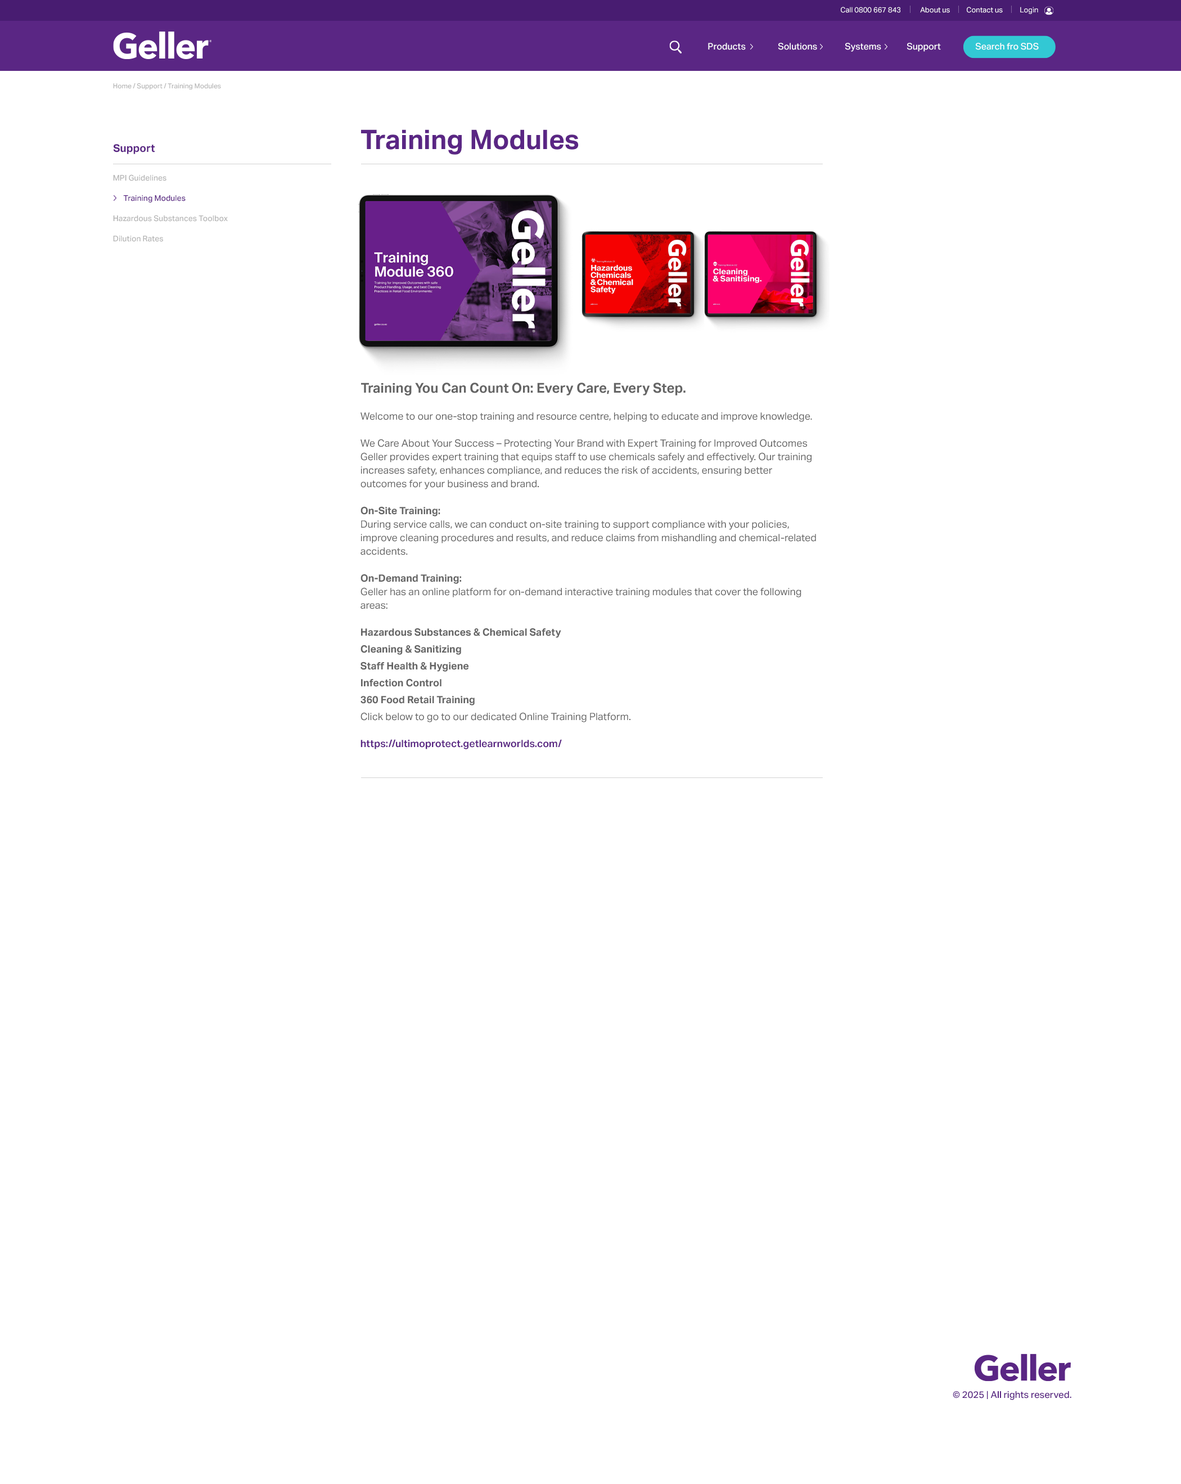
<style>
.page{position:relative;width:1181px;height:1484px;background:#ffffff}
.page>*{position:absolute;margin:0}
.t1{font:7.3px "AktivGrotesk-Regular";color:#fefefe}
.t2{font:9px "AktivGrotesk-Medium";color:#fefefe}
.t3{font:6.8px "AktivGrotesk-Medium";color:#b4b4b4}
.t4{font:27px "AktivGrotesk-Bold";color:#5a2684}
.t5{font:10.7px "AktivGrotesk-Bold";color:#5a2684}
.t6{font:7.9px/20.2px "AktivGrotesk-Medium";color:#b4b4b4}
.t7{font:7.9px/20.2px "AktivGrotesk-Medium";color:#5a2684}
.t8{font:13.5px "AktivGrotesk-Bold";color:#646464}
.t9{font:10.1px/13.5px "AktivGrotesk-Regular";color:#646464}
.t10{font:10.1px/13.5px "AktivGrotesk-Bold";color:#646464}
.t11{font:10.1px/13.5px "AktivGrotesk-SemiBold";color:#5a2684}
.t12{font:9.4px "AktivGrotesk-Medium";color:#5a2684}
</style>
<div class="page">
<p class="t1" style="left:841px;top:7px;width:60px;height:6px">Call 0800 667 843</p>
<p class="t1" style="left:920px;top:7px;width:30px;height:6px">About us</p>
<p class="t1" style="left:967px;top:7px;width:36px;height:6px">Contact us</p>
<p class="t1" style="left:1020px;top:7px;width:18px;height:7px">Login</p>
<p class="t2" style="left:708px;top:43px;width:38px;height:7px">Products</p>
<p class="t2" style="left:778px;top:43px;width:39px;height:7px">Solutions</p>
<p class="t2" style="left:845px;top:43px;width:36px;height:9px">Systems</p>
<p class="t2" style="left:907px;top:43px;width:34px;height:9px">Support</p>
<p class="t2" style="left:975px;top:43px;width:64px;height:7px">Search fro SDS</p>
<p class="t3" style="left:113px;top:83px;width:108px;height:7px">Home / Support / Training Modules</p>
<p class="t4" style="left:361px;top:129px;width:218px;height:26px">Training Modules</p>
<p class="t5" style="left:113px;top:144px;width:42px;height:10px">Support</p>
<p class="t6" style="left:113px;top:174px;width:115px;height:68px">MPI Guidelines<br><span class="t7">      Training Modules<br></span>Hazardous Substances Toolbox<br>Dilution Rates</p>
<p class="t8" style="left:361px;top:382px;width:325px;height:13px">Training You Can Count On: Every Care, Every Step.</p>
<p class="t9" style="left:361px;top:412px;width:455px;height:337px">Welcome to our one-stop training and resource centre, helping to educate and improve knowledge.<br><br>We Care About Your Success – Protecting Your Brand with Expert Training for Improved Outcomes<br>Geller provides expert training that equips staff to use chemicals safely and effectively. Our training increases safety, enhances compliance, and reduces the risk of accidents, ensuring better outcomes for your business and brand.<br><br><span class="t10">On-Site Training:<br></span>During service calls, we can conduct on-site training to support compliance with your policies, improve cleaning procedures and results, and reduce claims from mishandling and chemical-related accidents.<br><br><span class="t10">On-Demand Training:<br></span>Geller has an online platform for on-demand interactive training modules that cover the following areas:<br><br><span class="t10">Hazardous Substances &amp; Chemical Safety<br>Cleaning &amp; Sanitizing<br>Staff Health &amp; Hygiene<br>Infection Control<br>360 Food Retail Training<br></span>Click below to go to our dedicated Online Training Platform.<br><br><span class="t11">https://ultimoprotect.getlearnworlds.com/</span></p>
<p class="t12" style="left:953px;top:1390px;width:119px;height:10px">© 2025 | All rights reserved.</p>
</div>
